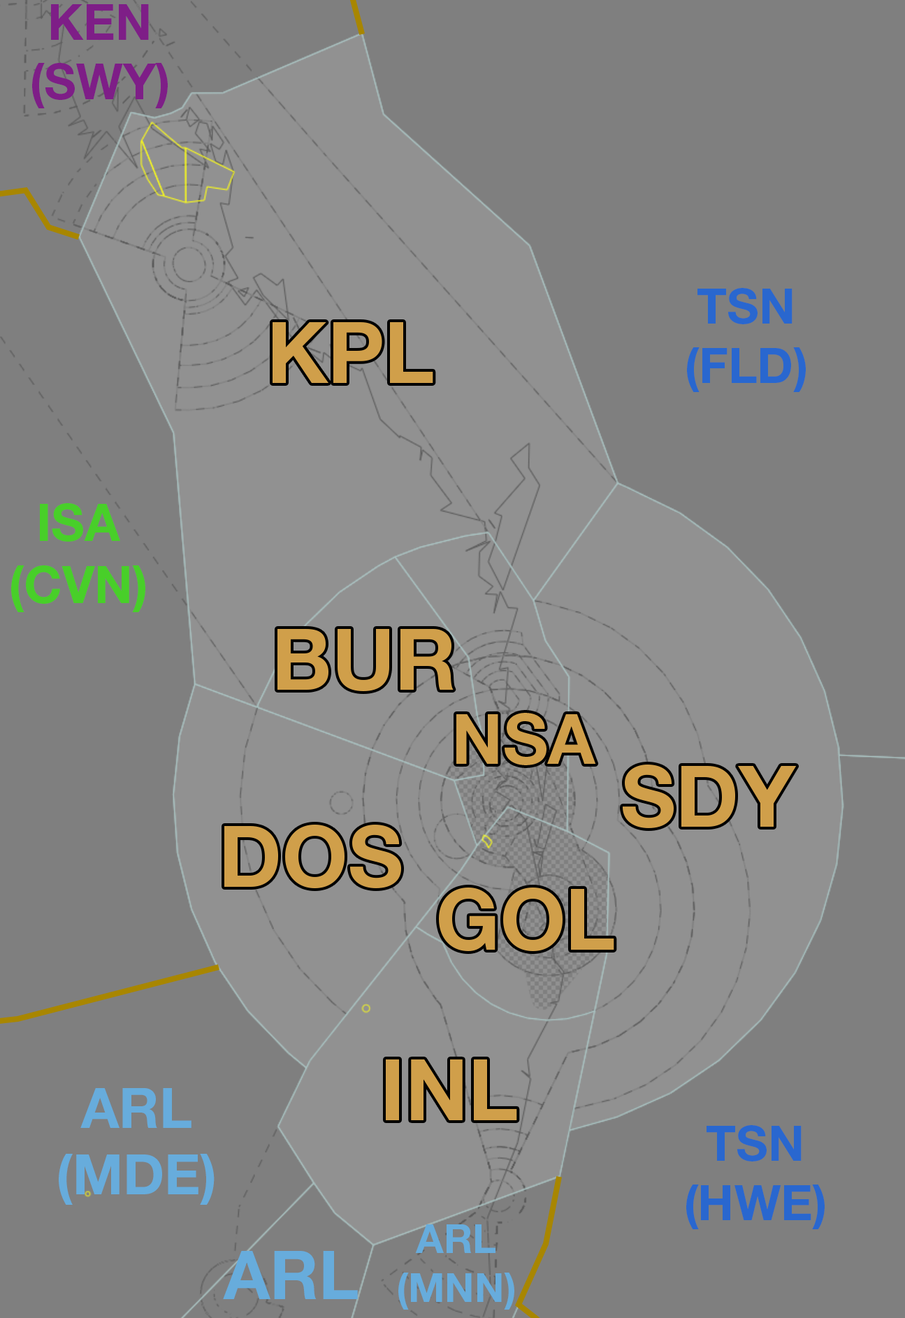
<style>
.page{position:relative;width:905px;height:1318px;background:#7f7f7f}
.page>*{position:absolute;margin:0}
.t1{font:49.5px "HelveticaNeueLTStd-Bd";color:#7e1e87}
.t2{font:49.3px "HelveticaNeueLTStd-Bd";color:#2967cf}
.t3{font:84.9px "HelveticaNeueLTStd-Bd";color:#d09f4a}
.t4{font:51.5px "HelveticaNeueLTStd-Bd";color:#48cf29}
.t5{font:69.2px "HelveticaNeueLTStd-Bd";color:#d09f4a}
.t6{font:55.7px "HelveticaNeueLTStd-Bd";color:#67acdc}
.t7{font:40.3px "HelveticaNeueLTStd-Bd";color:#67acdc}
.t8{font:67.7px "HelveticaNeueLTStd-Bd";color:#67acdc}
</style>
<div class="page">
<p class="t1" style="left:32px;top:4px;width:136px;height:104px;text-align:center">KEN<br>(SWY)</p>
<p class="t2" style="left:687px;top:288px;width:119px;height:104px;text-align:center">TSN<br>(FLD)</p>
<p class="t3" style="left:273px;top:322px;width:160px;height:61px">KPL</p>
<p class="t4" style="left:11px;top:503px;width:134px;height:109px;text-align:center">ISA<br>(CVN)</p>
<p class="t3" style="left:277px;top:629px;width:176px;height:62px">BUR</p>
<p class="t5" style="left:456px;top:713px;width:140px;height:52px">NSA</p>
<p class="t3" style="left:623px;top:764px;width:174px;height:64px">SDY</p>
<p class="t3" style="left:224px;top:825px;width:177px;height:63px">DOS</p>
<p class="t3" style="left:439px;top:887px;width:175px;height:64px">GOL</p>
<p class="t3" style="left:386px;top:1059px;width:131px;height:61px">INL</p>
<p class="t6" style="left:59px;top:1088px;width:156px;height:117px;text-align:center">ARL<br>(MDE)</p>
<p class="t2" style="left:686px;top:1125px;width:139px;height:104px;text-align:center">TSN<br>(HWE)</p>
<p class="t7" style="left:398px;top:1224px;width:116px;height:85px;text-align:center">ARL<br>(MNN)</p>
<p class="t8" style="left:223px;top:1251px;width:135px;height:48px">ARL</p>
</div>
